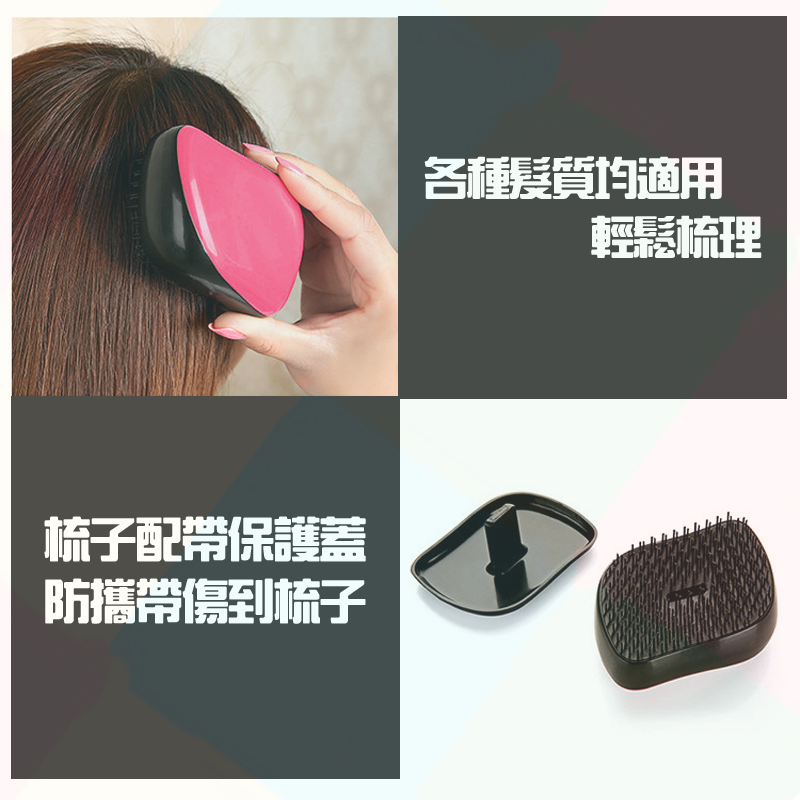
<style>
.page{position:relative;width:800px;height:800px}
.page>*{position:absolute;margin:0}
.t1{font:44.3px/59.1px "HanWangZonYi";letter-spacing:-0.05em;color:#ffffff;font-weight:bold}
.t2{font:47px/62.6px "HanWangZonYi";letter-spacing:-0.05em;color:#ffffff;font-weight:bold}
</style>
<div class="page">
<p class="t1" style="left:424px;top:156px;width:338px;height:102px">各種髮質均適用<br>        輕鬆梳理</p>
<p class="t2" style="left:44px;top:516px;width:322px;height:108px">梳子配帶保護蓋<br>防攜帶傷到梳子</p>
</div>
